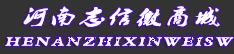
<style>
.page{position:relative;width:234px;height:54px;background:#333333}
.page>*{position:absolute;margin:0}
.t1{font:19.6px "2.0-";letter-spacing:0.151em;color:#feffff;font-style:italic;scale:1.27 1}
.t2{font:13.3px "2.0-";letter-spacing:0.151em;color:#fffffc;font-style:italic;scale:1.27 1}
</style>
<div class="page">
<p class="t1" style="left:23px;top:6px;width:197px;height:21px">河南志信微商城</p>
<p class="t2" style="left:5px;top:37px;width:229px;height:9px">HENANZHIXINWEISW</p>
</div>
